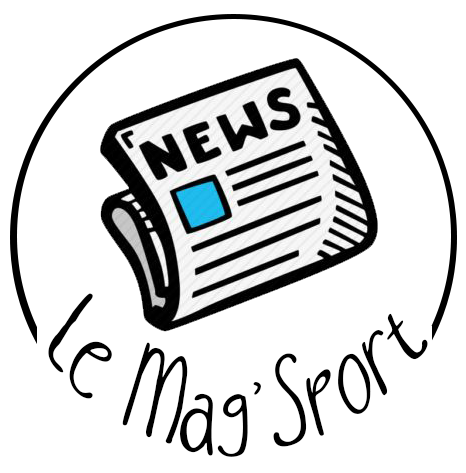
<style>
.page{position:relative;width:466px;height:473px;background:#ffffff}
.page>*{position:absolute;margin:0}
.t1{font:125.6px "AfterSunsetRegular";color:#000000;scale:0.69 1}
</style>
<div class="page">
<p class="t1" style="left:48px;top:293px;width:380px;height:164px;rotate:-1deg">Le Mag'Sport</p>
</div>
